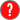
<style>
.page{position:relative;width:20px;height:20px;background:#ff0c0c}
.page>*{position:absolute;margin:0}
.t1{font:16.7px "Futura-CondensedMedium";color:#ffffff}
</style>
<div class="page">
<p class="t1" style="left:7px;top:3px;width:6px;height:14px">?</p>
</div>
